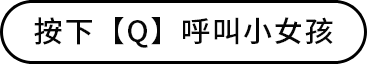
<style>
.page{position:relative;width:367px;height:64px;background:#ffffff}
.page>*{position:absolute;margin:0}
.t1{font:29.2px "NotoSansCJKtc-Medium";letter-spacing:0.06em;color:#060606}
</style>
<div class="page">
<p class="t1" style="left:34px;top:17px;width:299px;height:31px">按下【Q】呼叫小女孩</p>
</div>
